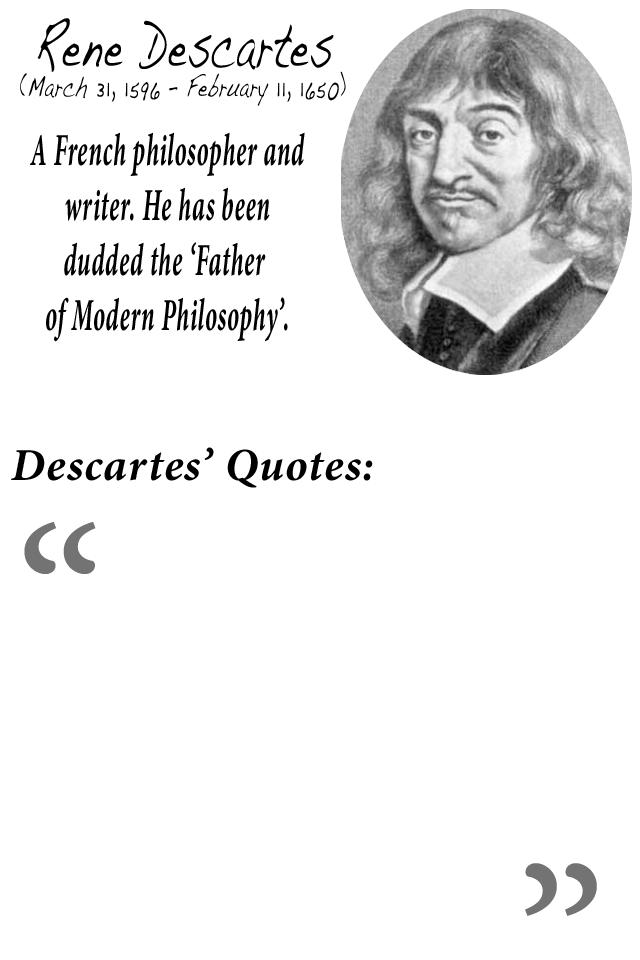
<style>
.page{position:relative;width:640px;height:960px;background:#ffffff}
.page>*{position:absolute;margin:0}
.t1{font:63.7px "Handwriting-Dakota";letter-spacing:0.03em;color:#000000;scale:0.59 1}
.t2{font:29.2px "Handwriting-Dakota";letter-spacing:0.03em;color:#000000;scale:0.63 1}
.t3{font:45.8px "MinionPro-BoldIt";letter-spacing:0.03em;color:#000000;scale:0.53 1}
.t4{font:45.8px "MinionPro-BoldIt";letter-spacing:0.03em;color:#000000}
.t5{font:225px "MinionPro-Regular";letter-spacing:0.03em;color:#737373}
</style>
<div class="page">
<p class="t1" style="left:37px;top:18px;width:297px;height:54px">Rene Descartes</p>
<p class="t2" style="left:20px;top:71px;width:326px;height:35px">(March 31, 1596 – February 11, 1650)</p>
<p class="t3" style="left:30px;top:132px;width:275px;height:210px;text-align:center">A French philosopher and<br>writer. He has been<br>dudded the ‘Father <br>of Modern Philosophy’.</p>
<p class="t4" style="left:11px;top:447px;width:362px;height:41px">Descartes’ Quotes:</p>
<p class="t5" style="left:24px;top:522px;width:72px;height:52px">“</p>
<p class="t5" style="left:525px;top:863px;width:72px;height:53px">”</p>
</div>
